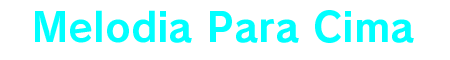
<style>
.page{position:relative;width:450px;height:60px;background:#ffffff}
.page>*{position:absolute;margin:0}
.t1{font:40px "RodinPro-B";color:#00ffff}
</style>
<div class="page">
<p class="t1" style="left:35px;top:10px;width:379px;height:33px">Melodia Para Cima</p>
</div>
